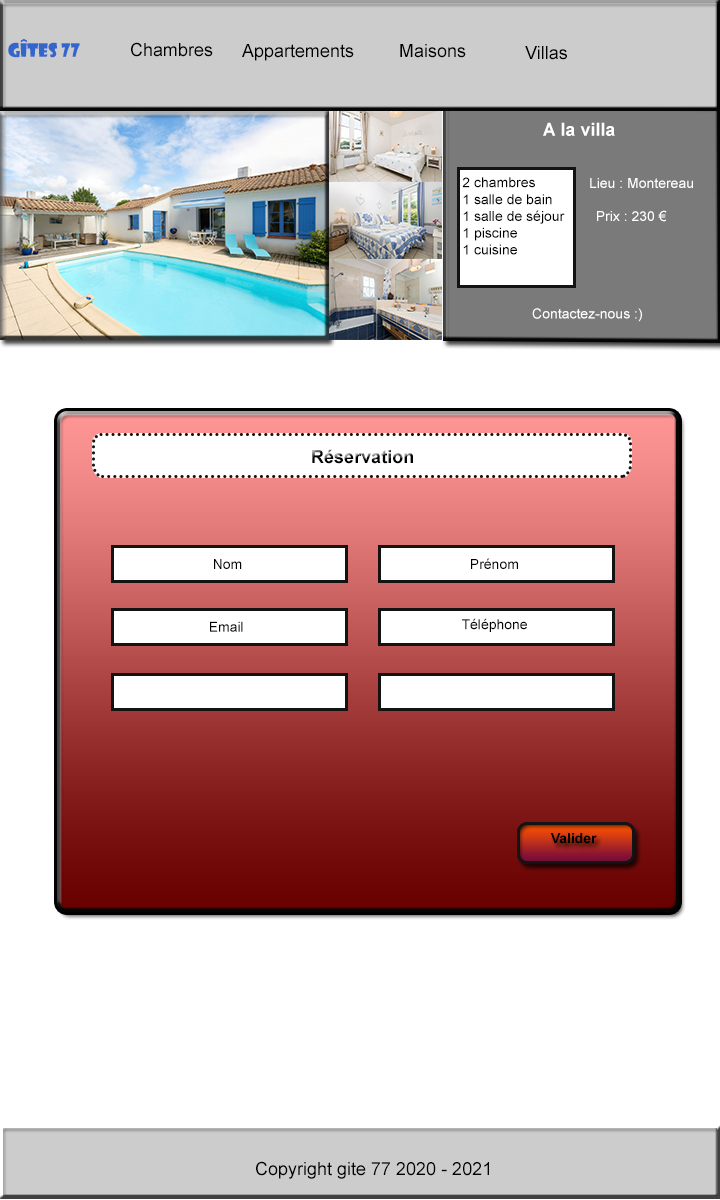
<style>
.page{position:relative;width:720px;height:1200px;background:#ffffff}
.page>*{position:absolute;margin:0}
.t1{font:18px "ShowcardGothic-Reg";color:#3366cc}
.t2{font:18px "ArialMT";color:#000000}
.t3{font:18px "Arial-BoldMT";color:#ffffff}
.t4{font:14px "ArialMT";color:#000000}
.t5{font:14px "ArialMT";color:#ffffff}
.t6{font:18px "Arial-BoldMT"}
.t7{font:14px "Arial-BoldMT";color:#000000}
</style>
<div class="page">
<p class="t1" style="left:8px;top:38px;width:72px;height:20px">Gîtes 77</p>
<p class="t2" style="left:131px;top:42px;width:82px;height:15px">Chambres</p>
<p class="t2" style="left:242px;top:44px;width:112px;height:17px">Appartements</p>
<p class="t2" style="left:400px;top:44px;width:66px;height:14px">Maisons</p>
<p class="t2" style="left:525px;top:46px;width:42px;height:14px">Villas</p>
<p class="t3" style="left:543px;top:122px;width:72px;height:14px">A la villa</p>
<p class="t4" style="left:462px;top:177px;width:103px;height:78px">2 chambres<br>1 salle de bain<br>1 salle de séjour<br>1 piscine<br>1 cuisine</p>
<p class="t5" style="left:590px;top:178px;width:103px;height:10px">Lieu : Montereau</p>
<p class="t5" style="left:597px;top:210px;width:70px;height:12px">Prix : 230 €</p>
<p class="t5" style="left:532px;top:308px;width:110px;height:14px">Contactez-nous :)</p>
<p class="t6" style="left:312px;top:449px;width:101px;height:15px">Réservation</p>
<p class="t4" style="left:471px;top:558px;width:47px;height:11px">Prénom</p>
<p class="t4" style="left:214px;top:559px;width:28px;height:10px">Nom</p>
<p class="t4" style="left:210px;top:621px;width:33px;height:11px">Email</p>
<p class="t4" style="left:462px;top:618px;width:65px;height:14px">Téléphone</p>
<p class="t7" style="left:550px;top:833px;width:47px;height:11px">Valider</p>
<p class="t2" style="left:256px;top:1161px;width:233px;height:18px">Copyright gite 77 2020 - 2021</p>
</div>
